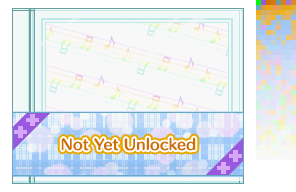
<style>
.page{position:relative;width:296px;height:192px;background:#f8f8f8}
.page>*{position:absolute;margin:0}
.t1{font:14px "HummingStd-B";letter-spacing:0.02em;color:#d07000}
</style>
<div class="page">
<p class="t1" style="left:61px;top:137px;width:135px;height:14px">Not Yet Unlocked</p>
</div>
